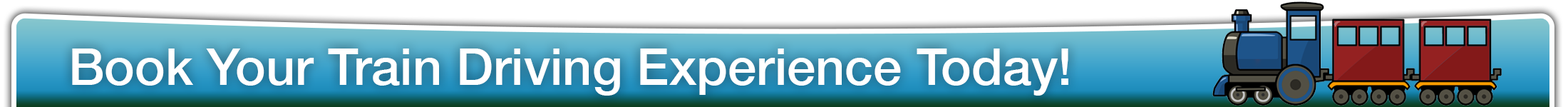
<style>
.page{position:relative;width:1568px;height:107px}
.page>*{position:absolute;margin:0}
.t1{font:51.3px "HelveticaNeue-Medium";color:#ffffff}
</style>
<div class="page">
<p class="t1" style="left:72px;top:48px;width:996px;height:48px">Book Your Train Driving Experience Today!</p>
</div>
